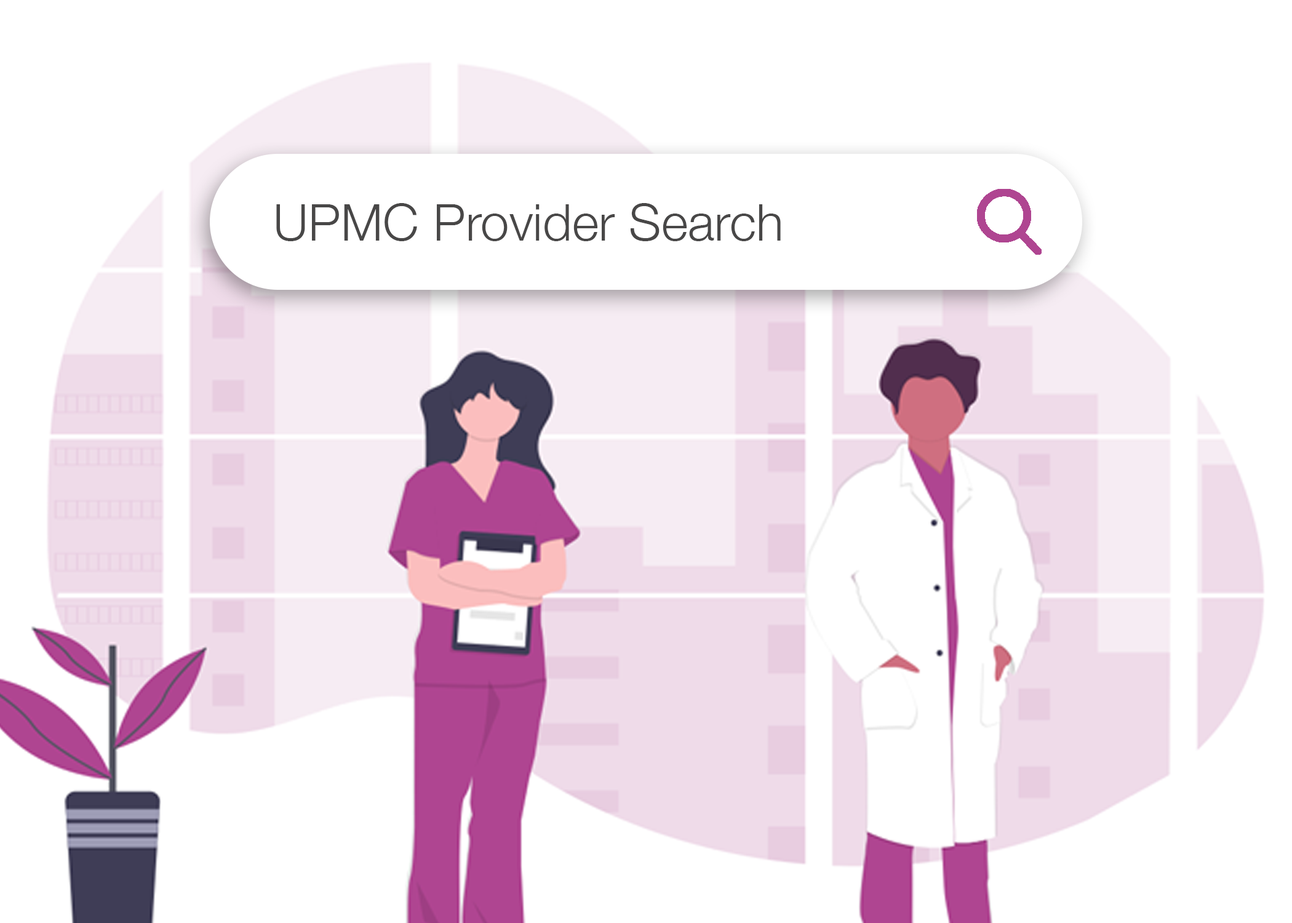
<style>
.page{position:relative;width:1292px;height:923px;background:#ffffff}
.page>*{position:absolute;margin:0}
.t1{font:51.3px "HelveticaNeue-Light";color:#484747}
</style>
<div class="page">
<p class="t1" style="left:276px;top:203px;width:505px;height:38px">UPMC Provider Search</p>
</div>
